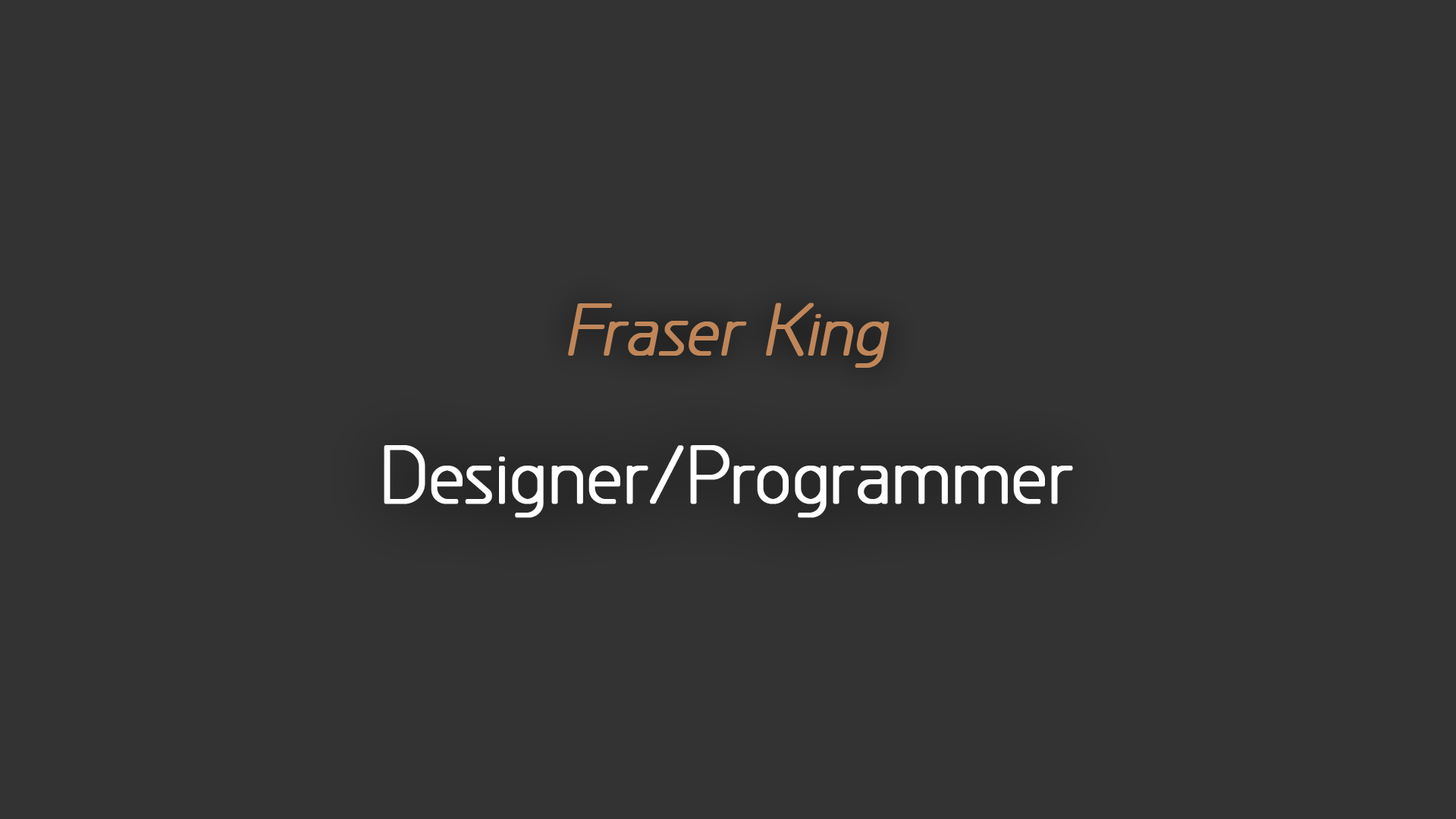
<style>
.page{position:relative;width:1456px;height:819px;background:#333333}
.page>*{position:absolute;margin:0}
.t1{font:68.2px "GreyscaleBasic";color:#c08659;font-weight:bold;font-style:italic}
.t2{font:75.8px "GreyscaleBasic";color:#ffffff;font-weight:bold}
</style>
<div class="page">
<p class="t1" style="left:568px;top:303px;width:322px;height:65px">Fraser King</p>
<p class="t2" style="left:384px;top:445px;width:689px;height:73px">Designer/Programmer</p>
</div>
